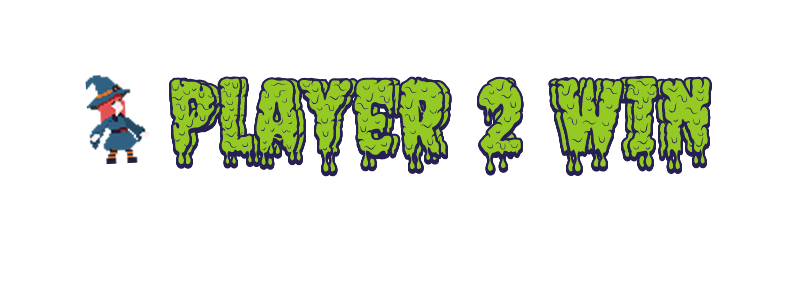
<style>
.page{position:relative;width:800px;height:300px;background:#ffffff}
.page>*{position:absolute;margin:0}
.t1{font:105.6px "MeltingRegular";scale:1.05 1}
</style>
<div class="page">
<p class="t1" style="left:169px;top:75px;width:543px;height:102px">Player 2 win</p>
<p class="t1" style="left:175px;top:75px;width:530px;height:102px">Player 1 win</p>
</div>
